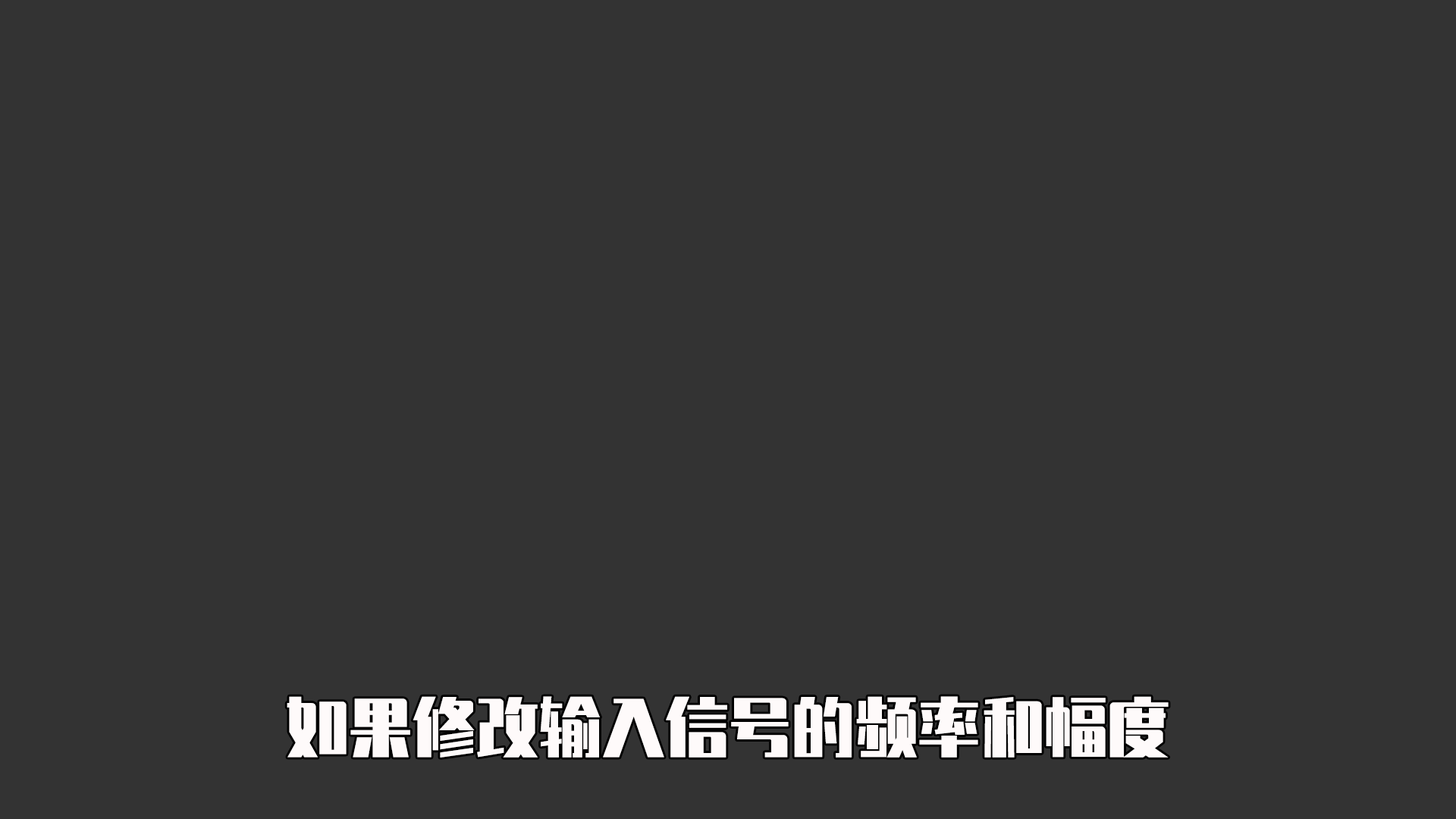
<style>
.page{position:relative;width:1456px;height:819px;background:#333333}
.page>*{position:absolute;margin:0}
.t1{font:63.2px "ZhenyanGB-Regular";color:#fefafa}
</style>
<div class="page">
<p class="t1" style="left:287px;top:696px;width:882px;height:62px">如果修改输入信号的频率和幅度</p>
</div>
